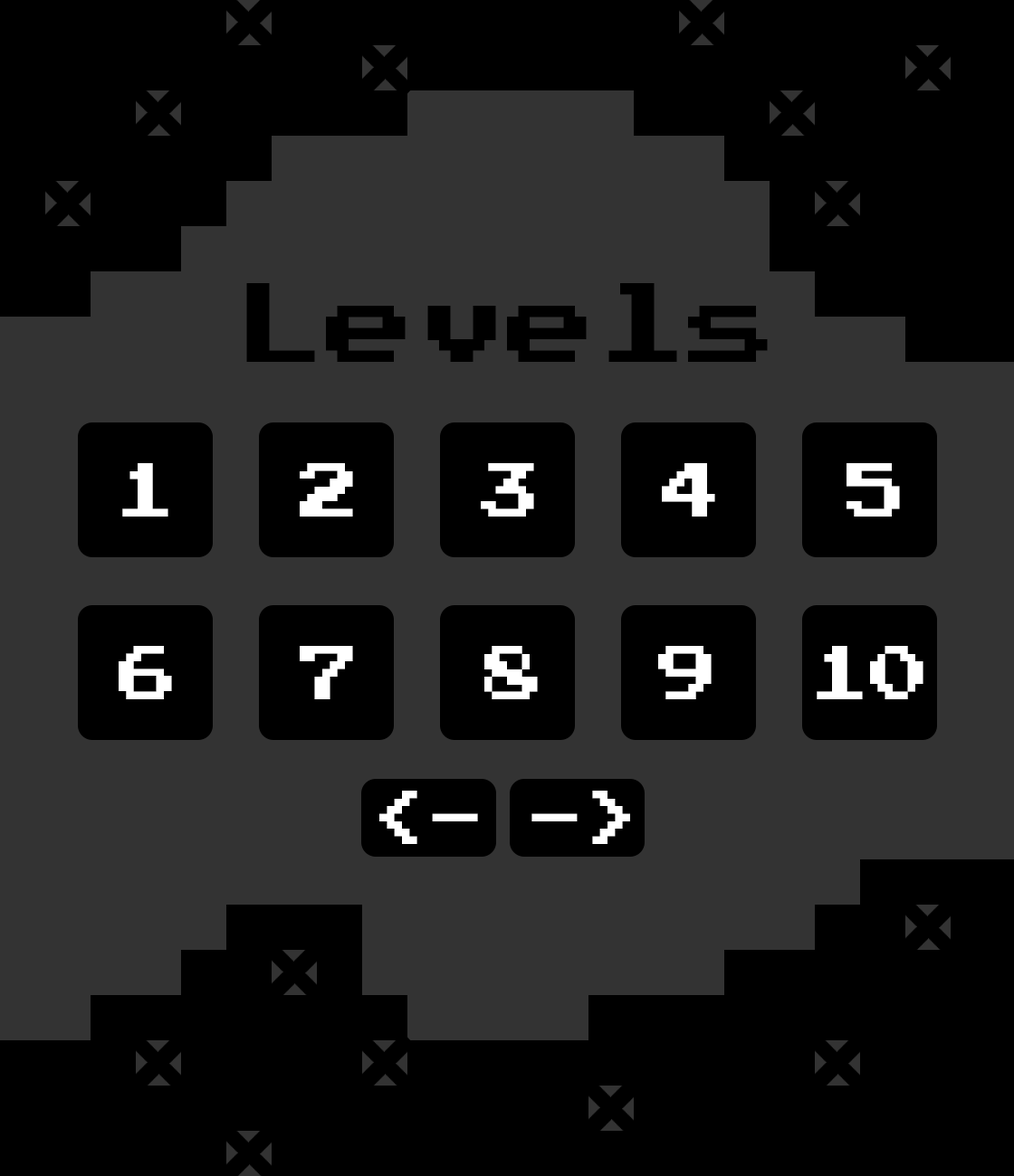
<style>
.page{position:relative;width:1014px;height:1176px;background:#000000}
.page>*{position:absolute;margin:0}
.t1{font:90.5px "PressStart2P-Regular";color:#000000}
.t2{font:60.3px "PressStart2P-Regular";color:#ffffff}
</style>
<div class="page">
<p class="t1" style="left:246px;top:283px;width:521px;height:79px">Levels</p>
<p class="t2" style="left:122px;top:463px;width:46px;height:54px">1</p>
<p class="t2" style="left:300px;top:463px;width:53px;height:54px">2</p>
<p class="t2" style="left:481px;top:463px;width:53px;height:54px">3</p>
<p class="t2" style="left:662px;top:463px;width:53px;height:54px">4</p>
<p class="t2" style="left:846px;top:463px;width:54px;height:54px">5</p>
<p class="t2" style="left:119px;top:646px;width:53px;height:54px">6</p>
<p class="t2" style="left:300px;top:646px;width:53px;height:54px">7</p>
<p class="t2" style="left:484px;top:646px;width:54px;height:54px">8</p>
<p class="t2" style="left:658px;top:646px;width:53px;height:54px">9</p>
<p class="t2" style="left:816px;top:646px;width:107px;height:54px">10</p>
</div>
